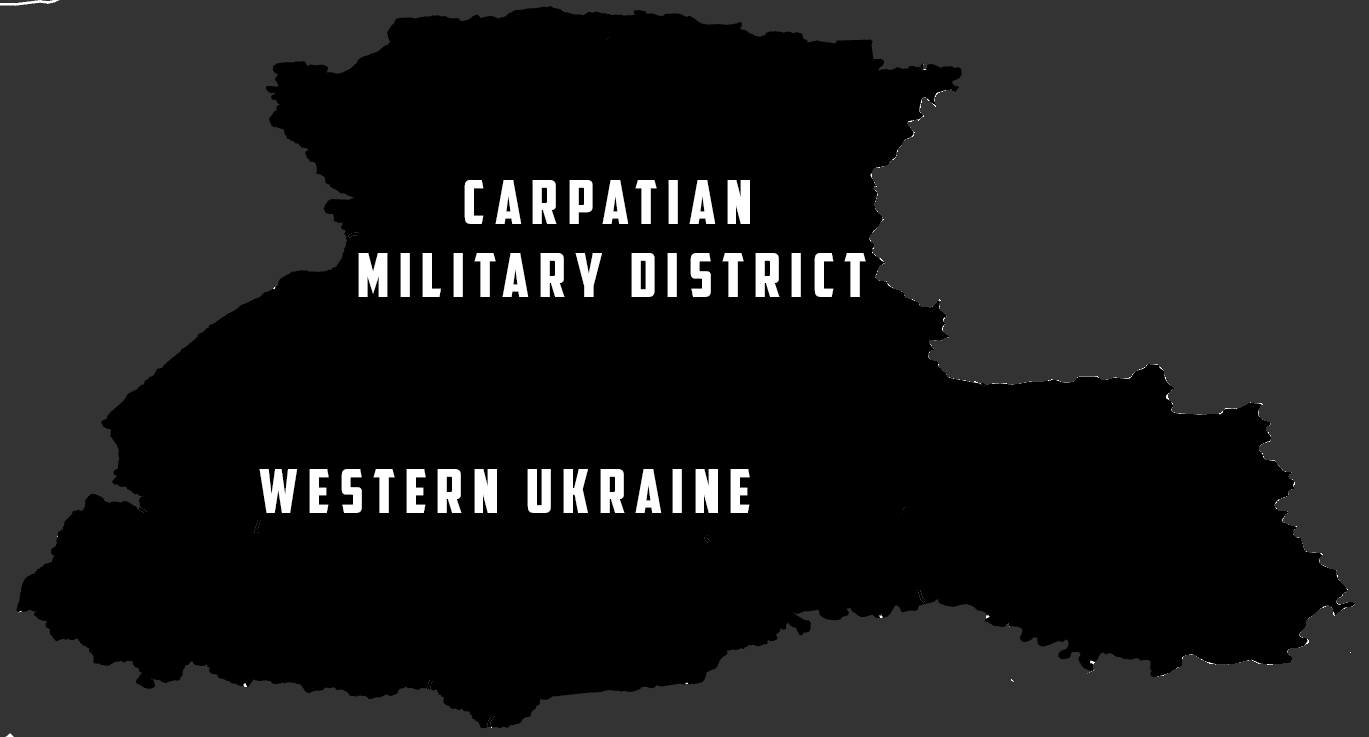
<style>
.page{position:relative;width:1369px;height:737px;background:#000000}
.page>*{position:absolute;margin:0}
.t1{font:61.3px "AmericanCaptain";letter-spacing:0.16em;color:#ffffff}
</style>
<div class="page">
<p class="t1" style="left:358px;top:180px;width:508px;height:117px;text-align:center">carpatian <br>military district</p>
<p class="t1" style="left:259px;top:469px;width:491px;height:44px">western ukraine</p>
</div>
